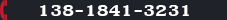
<style>
.page{position:relative;width:227px;height:20px;background:#1f2229}
.page>*{position:absolute;margin:0}
.t1{font:25px "JasmineUPCBold";color:#ffffff}
</style>
<div class="page">
<p class="t1" style="left:40px;top:5px;width:149px;height:11px">138-1841-3231</p>
</div>
